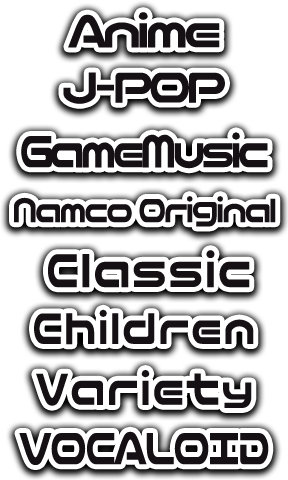
<style>
.page{position:relative;width:288px;height:480px;background:#ffffff}
.page>*{position:absolute;margin:0}
.t1{font:53.9px "NicoKaku";letter-spacing:-0.1em;color:#151013}
.t2{font:51.6px "NicoKaku";letter-spacing:-0.1em;color:#151013}
.t3{font:53.7px "NicoKaku";letter-spacing:-0.1em;color:#151013;scale:0.84 1}
.t4{font:40px "NicoKaku";letter-spacing:-0.08em;color:#151013;scale:0.85 1}
.t5{font:36px "NicoKaku";letter-spacing:-0.08em;color:#151013;scale:0.94 1}
.t6{font:56.6px "NicoKaku";letter-spacing:0.02em;color:#151013;scale:0.84 1}
.t7{font:52.4px "NicoKaku";letter-spacing:0.02em;color:#151013;scale:0.84 1}
.t8{font:53.6px "NicoKaku";letter-spacing:0.02em;color:#151013;scale:0.84 1}
.t9{font:37.5px "NicoKaku";letter-spacing:0.02em;color:#151013;scale:1.2 1}
.t10{font:53.6px "NicoKaku";letter-spacing:-0.055em;color:#151013;scale:0.84 1}
</style>
<div class="page">
<p class="t1" style="left:68px;top:12px;width:152px;height:36px">Anime</p>
<p class="t2" style="left:63px;top:72px;width:162px;height:32px">J-POP</p>
<p class="t3" style="left:21px;top:132px;width:247px;height:37px">GameMusic</p>
<p class="t4" style="left:14px;top:196px;width:262px;height:31px">Namco Ori<span class="t5">g</span>inal</p>
<p class="t6" style="left:48px;top:250px;width:202px;height:38px">Classic</p>
<p class="t7" style="left:34px;top:309px;width:220px;height:36px">Children</p>
<p class="t8" style="left:36px;top:370px;width:216px;height:38px">Variet<span class="t9">y</span></p>
<p class="t10" style="left:19px;top:431px;width:250px;height:34px">VOCALOID</p>
</div>
